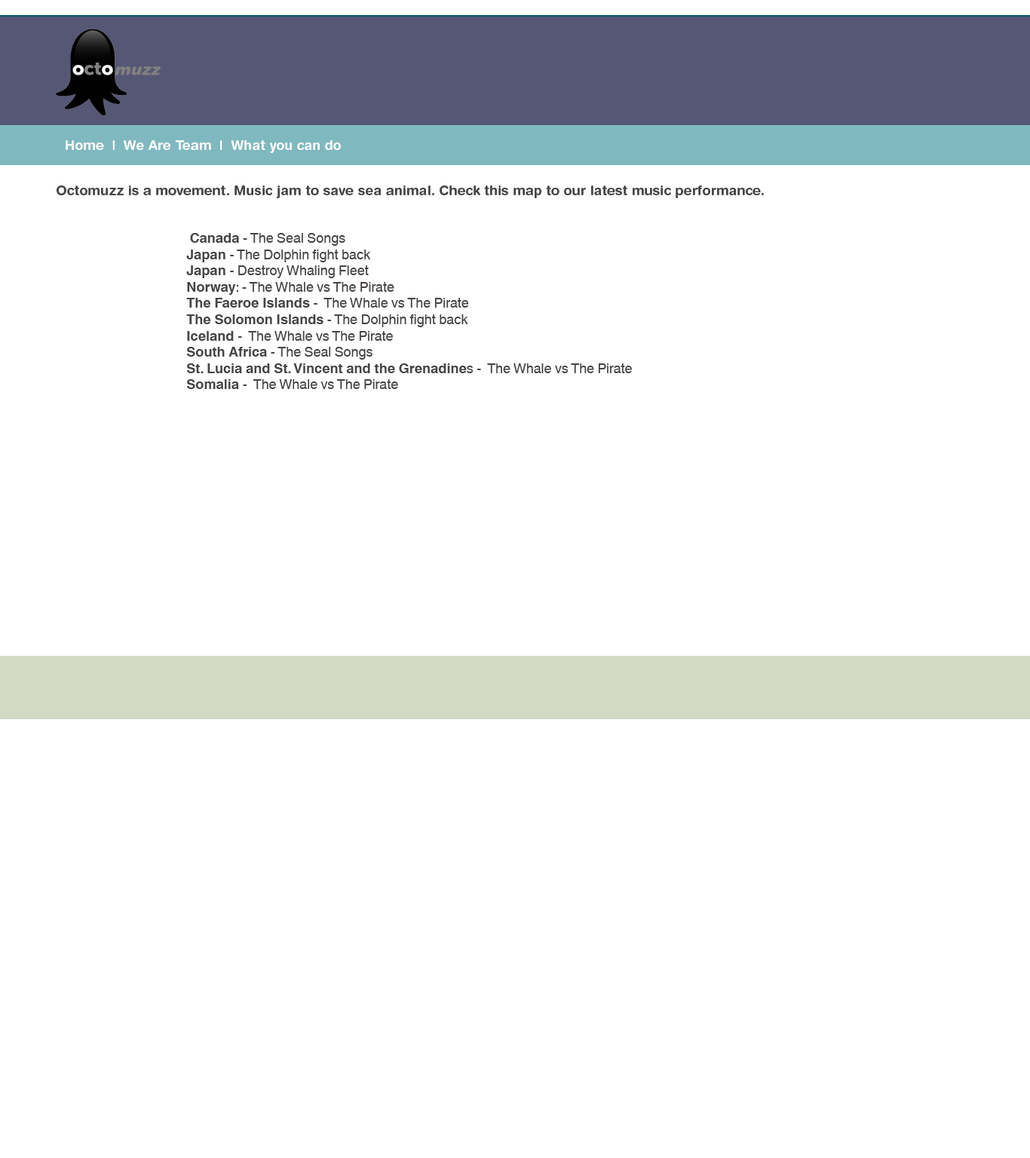
<style>
.page{position:relative;width:1030px;height:1158px;background:#ffffff}
.page>*{position:absolute;margin:0}
.t1{font:13.6px "HelveticaRoundedLTStd-Bd";color:#fbfafb}
.t2{font:13.6px "HelveticaRoundedLTStd-Bd";color:#484446}
.t3{font:13.6px "HelveticaWorld-Bold";color:#484446}
.t4{font:13.6px "HelveticaWorld-Regular";color:#484446}
</style>
<div class="page">
<p class="t1" style="left:66px;top:140px;width:275px;height:13px">Home  |  We Are Team  |  What you can do</p>
<p class="t2" style="left:57px;top:185px;width:707px;height:13px">Octomuzz is a movement. Music jam to save sea animal. Check this map to our latest music performance.</p>
<p class="t3" style="left:186px;top:233px;width:446px;height:156px"><span class="t4"> </span>Canada <span class="t4">- The Seal Songs<br></span>Japan <span class="t4">- The Dolphin fight back<br></span>Japan <span class="t4">- Destroy Whaling Fleet<br></span>Norway<span class="t4">: - The Whale vs The Pirate<br></span>The Faeroe Islands<span class="t4"> -  The Whale vs The Pirate<br></span>The Solomon Islands<span class="t4"> - The Dolphin fight back<br></span>Iceland <span class="t4">-  The Whale vs The Pirate<br></span>South Africa<span class="t4"> - The Seal Songs<br></span>St. Lucia and St. Vincent and the Grenadine<span class="t4">s -  The Whale vs The Pirate<br></span>Somalia <span class="t4">-  The Whale vs The Pirate</span></p>
</div>
